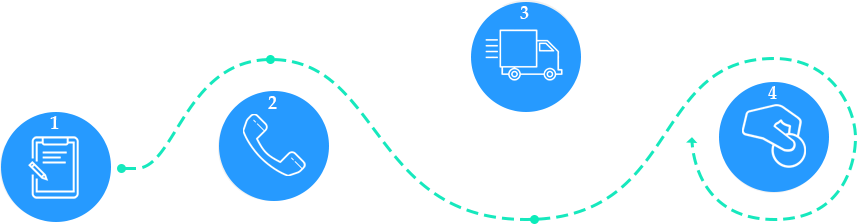
<style>
.page{position:relative;width:857px;height:224px;background:#ffffff}
.page>*{position:absolute;margin:0}
.t1{font:18px "PalatinoLinotype-Bold";color:#ffffff}
</style>
<div class="page">
<p class="t1" style="left:520px;top:6px;width:9px;height:13px">3</p>
<p class="t1" style="left:768px;top:86px;width:9px;height:13px">4</p>
<p class="t1" style="left:268px;top:96px;width:9px;height:13px">2</p>
<p class="t1" style="left:50px;top:116px;width:9px;height:13px">1</p>
</div>
